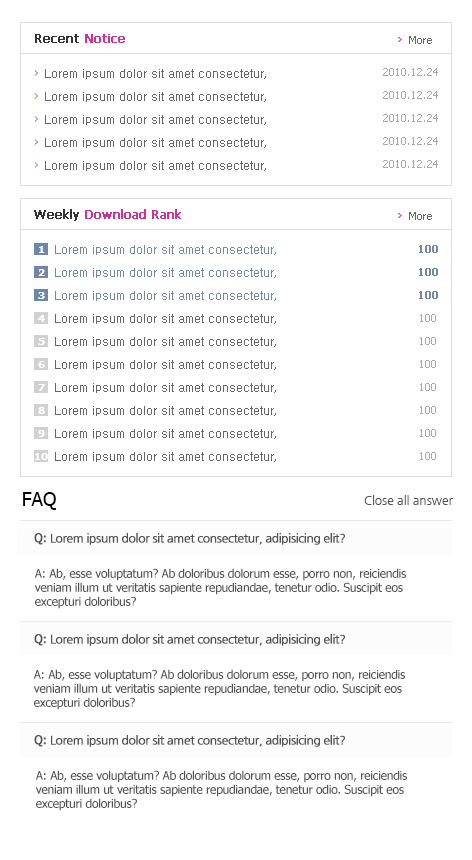
<style>
.page{position:relative;width:472px;height:860px;background:#ffffff}
.page>*{position:absolute;margin:0}
.t1{font:12px "Tahoma";color:#333333;font-weight:bold}
.t2{font:12px "Tahoma";color:#cf3292;font-weight:bold}
.t3{font:11px "Tahoma";color:#666666}
.t4{font:12px/23px "Dotum";color:#666666}
.t5{font:11px/23px "Tahoma";color:#a8a8a8}
.t6{font:12px/23px "Dotum";color:#7189a7}
.t7{font:11px/23px "Tahoma";color:#7189a7;font-weight:bold}
.t8{font:19px "Tahoma";color:#000000}
.t9{font:12px "NanumGothic";color:#535353}
.t10{font:12px "NanumGothic";letter-spacing:-0.05em;color:#535353;font-weight:bold}
.t11{font:12px "Tahoma";letter-spacing:-0.05em;color:#535353;font-weight:bold}
.t12{font:12px/14px "Tahoma";letter-spacing:-0.02em;color:#535353}
</style>
<div class="page">
<p class="t1" style="left:35px;top:34px;width:90px;height:9px">Recent <span class="t2">Notice</span></p>
<p class="t3" style="left:409px;top:36px;width:23px;height:8px">More</p>
<p class="t4" style="left:45px;top:69px;width:221px;height:102px">Lorem ipsum dolor sit amet consectetur,<br>Lorem ipsum dolor sit amet consectetur,<br>Lorem ipsum dolor sit amet consectetur,<br>Lorem ipsum dolor sit amet consectetur,<br>Lorem ipsum dolor sit amet consectetur,</p>
<p class="t5" style="left:383px;top:68px;width:55px;height:100px;text-align:center">2010.12.24<br>2010.12.24<br>2010.12.24<br>2010.12.24<br>2010.12.24</p>
<p class="t2" style="left:34px;top:209px;width:147px;height:12px"><span class="t1">Weekly </span>Download Rank</p>
<p class="t3" style="left:409px;top:212px;width:23px;height:8px">More</p>
<p class="t4" style="left:55px;top:245px;width:221px;height:217px"><span class="t6">Lorem ipsum dolor sit amet consectetur,<br>Lorem ipsum dolor sit amet consectetur,<br>Lorem ipsum dolor sit amet consectetur,<br></span>Lorem ipsum dolor sit amet consectetur,<br>Lorem ipsum dolor sit amet consectetur,<br>Lorem ipsum dolor sit amet consectetur,<br>Lorem ipsum dolor sit amet consectetur,<br>Lorem ipsum dolor sit amet consectetur,<br>Lorem ipsum dolor sit amet consectetur,<br>Lorem ipsum dolor sit amet consectetur,</p>
<p class="t5" style="left:419px;top:245px;width:19px;height:215px;text-align:center"><span class="t7">100<br>100<br>100<br></span>100<br>100<br>100<br>100<br>100<br>100<br>100</p>
<p class="t8" style="left:23px;top:492px;width:33px;height:18px">FAQ</p>
<p class="t9" style="left:364px;top:495px;width:89px;height:10px">Close all answer</p>
<p class="t10" style="left:34px;top:533px;width:311px;height:12px"><span class="t11">Q: </span>Lorem ipsum dolor sit amet consectetur, adipisicing elit?</p>
<p class="t12" style="left:34px;top:568px;width:372px;height:41px">A: Ab, esse voluptatum? Ab doloribus dolorum esse, porro non, reiciendis <br>veniam illum ut veritatis sapiente repudiandae, tenetur odio. Suscipit eos <br>excepturi doloribus?</p>
<p class="t10" style="left:34px;top:634px;width:311px;height:12px"><span class="t11">Q: </span>Lorem ipsum dolor sit amet consectetur, adipisicing elit?</p>
<p class="t12" style="left:33px;top:669px;width:372px;height:41px">A: Ab, esse voluptatum? Ab doloribus dolorum esse, porro non, reiciendis <br>veniam illum ut veritatis sapiente repudiandae, tenetur odio. Suscipit eos <br>excepturi doloribus?</p>
<p class="t10" style="left:34px;top:735px;width:311px;height:12px"><span class="t11">Q: </span>Lorem ipsum dolor sit amet consectetur, adipisicing elit?</p>
<p class="t12" style="left:35px;top:770px;width:372px;height:41px">A: Ab, esse voluptatum? Ab doloribus dolorum esse, porro non, reiciendis <br>veniam illum ut veritatis sapiente repudiandae, tenetur odio. Suscipit eos <br>excepturi doloribus?</p>
</div>
